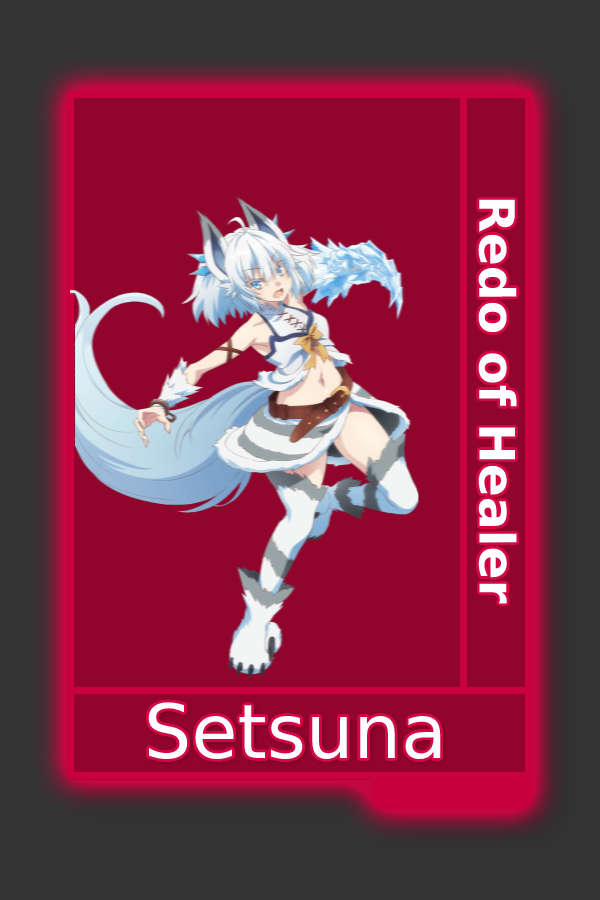
<style>
.page{position:relative;width:600px;height:900px;background:#91042c}
.page>*{position:absolute;margin:0}
.t1{font:48.8px "MADETOMMY-Bold";color:#fefdff}
.t2{font:75px "CoolveticaRg-Regular";color:#fefdff}
</style>
<div class="page">
<p class="t1" style="left:478px;top:199px;width:39px;height:405px;rotate:90deg">Redo of Healer</p>
<p class="t2" style="left:148px;top:702px;width:293px;height:58px">Setsuna</p>
</div>
